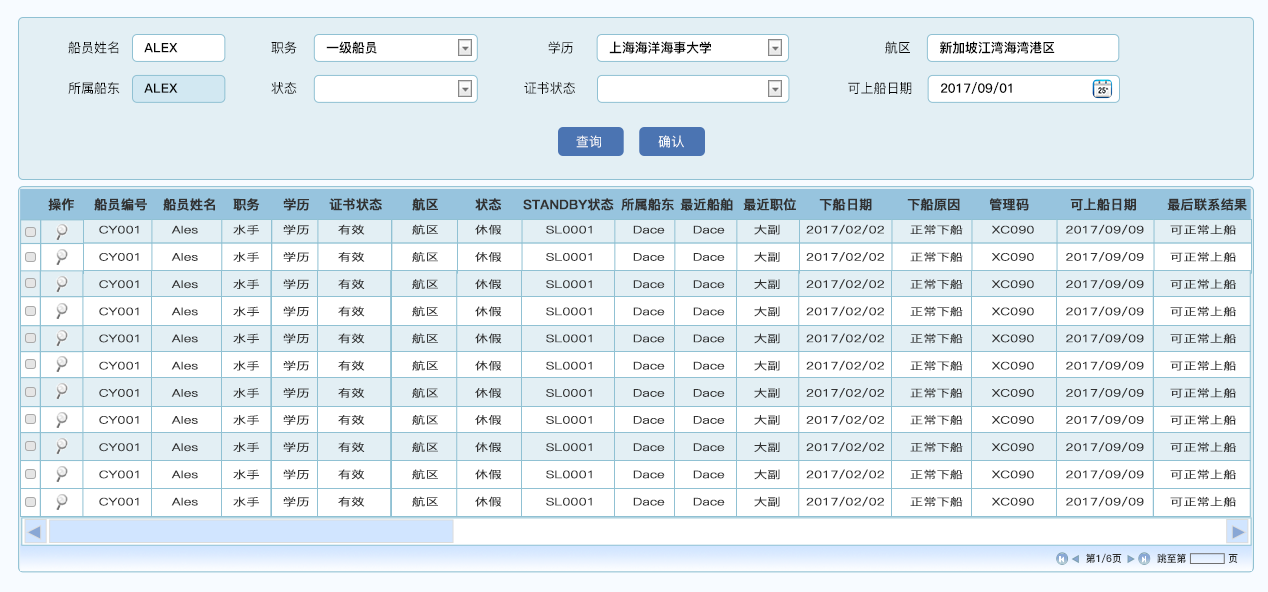
<style>
.page{position:relative;width:1268px;height:592px;background:#e3eff4}
.page>*{position:absolute;margin:0}
.t1{font:13.2px "PingFang-SC-Medium";color:#050505}
.t2{font:13px "PingFang-SC-Heavy";color:#050505}
.t3{font:13.2px "PingFang-SC-Medium";color:#ffffff}
.t4{font:13px "PingFang-SC-Bold";color:#323232;font-weight:bold}
.t5{font:10.4px/13.6px "PingFang-SC-Regular";color:#323232;font-weight:bold;scale:1.26 1}
.t6{font:10px "PingFang-SC-Heavy";color:#2d2e2e}
</style>
<div class="page">
<p class="t1" style="left:68px;top:41px;width:51px;height:13px">船员姓名</p>
<p class="t1" style="left:271px;top:41px;width:26px;height:13px">职务</p>
<p class="t2" style="left:326px;top:41px;width:51px;height:13px">一级船员</p>
<p class="t1" style="left:548px;top:41px;width:25px;height:13px">学历</p>
<p class="t2" style="left:609px;top:41px;width:102px;height:13px">上海海洋海事大学</p>
<p class="t1" style="left:885px;top:41px;width:25px;height:13px">航区</p>
<p class="t2" style="left:940px;top:41px;width:115px;height:13px">新加坡江湾海湾港区</p>
<p class="t2" style="left:144px;top:43px;width:34px;height:10px">ALEX</p>
<p class="t1" style="left:68px;top:81px;width:52px;height:13px">所属船东</p>
<p class="t2" style="left:144px;top:83px;width:34px;height:10px">ALEX</p>
<p class="t1" style="left:271px;top:82px;width:26px;height:12px">状态</p>
<p class="t1" style="left:524px;top:82px;width:51px;height:12px">证书状态</p>
<p class="t1" style="left:848px;top:81px;width:64px;height:13px">可上船日期</p>
<p class="t2" style="left:941px;top:82px;width:71px;height:12px">2017/09/01</p>
<p class="t3" style="left:576px;top:135px;width:25px;height:13px">查询</p>
<p class="t3" style="left:658px;top:135px;width:26px;height:13px">确认</p>
<p class="t4" style="left:48px;top:198px;width:26px;height:13px">操作</p>
<p class="t4" style="left:94px;top:198px;width:53px;height:13px">船员编号</p>
<p class="t4" style="left:163px;top:198px;width:52px;height:13px">船员姓名</p>
<p class="t4" style="left:233px;top:198px;width:27px;height:13px">职务</p>
<p class="t4" style="left:283px;top:198px;width:26px;height:13px">学历</p>
<p class="t4" style="left:329px;top:198px;width:53px;height:13px">证书状态</p>
<p class="t4" style="left:412px;top:198px;width:26px;height:13px">航区</p>
<p class="t4" style="left:475px;top:198px;width:27px;height:13px">状态</p>
<p class="t4" style="left:523px;top:198px;width:91px;height:13px">STANDBY状态</p>
<p class="t4" style="left:621px;top:198px;width:53px;height:13px">所属船东</p>
<p class="t4" style="left:680px;top:198px;width:53px;height:13px">最近船舶</p>
<p class="t4" style="left:743px;top:198px;width:53px;height:13px">最近职位</p>
<p class="t4" style="left:819px;top:198px;width:53px;height:13px">下船日期</p>
<p class="t4" style="left:907px;top:198px;width:53px;height:13px">下船原因</p>
<p class="t4" style="left:989px;top:198px;width:40px;height:13px">管理码</p>
<p class="t4" style="left:1070px;top:198px;width:66px;height:13px">可上船日期</p>
<p class="t4" style="left:1167px;top:198px;width:80px;height:13px">最后联系结果</p>
<p class="t5" style="left:99px;top:225px;width:40px;height:281px">CY001<br><br>CY001<br><br>CY001<br><br>CY001<br><br>CY001<br><br>CY001<br><br>CY001<br><br>CY001<br><br>CY001<br><br>CY001<br><br>CY001</p>
<p class="t5" style="left:171px;top:225px;width:27px;height:281px">Ales<br><br>Ales<br><br>Ales<br><br>Ales<br><br>Ales<br><br>Ales<br><br>Ales<br><br>Ales<br><br>Ales<br><br>Ales<br><br>Ales</p>
<p class="t5" style="left:233px;top:224px;width:26px;height:283px">水手<br><br>水手<br><br>水手<br><br>水手<br><br>水手<br><br>水手<br><br>水手<br><br>水手<br><br>水手<br><br>水手<br><br>水手</p>
<p class="t5" style="left:283px;top:224px;width:26px;height:283px">学历<br><br>学历<br><br>学历<br><br>学历<br><br>学历<br><br>学历<br><br>学历<br><br>学历<br><br>学历<br><br>学历<br><br>学历</p>
<p class="t5" style="left:338px;top:224px;width:27px;height:283px">有效<br><br>有效<br><br>有效<br><br>有效<br><br>有效<br><br>有效<br><br>有效<br><br>有效<br><br>有效<br><br>有效<br><br>有效</p>
<p class="t5" style="left:412px;top:224px;width:26px;height:283px">航区<br><br>航区<br><br>航区<br><br>航区<br><br>航区<br><br>航区<br><br>航区<br><br>航区<br><br>航区<br><br>航区<br><br>航区</p>
<p class="t5" style="left:475px;top:224px;width:27px;height:283px">休假<br><br>休假<br><br>休假<br><br>休假<br><br>休假<br><br>休假<br><br>休假<br><br>休假<br><br>休假<br><br>休假<br><br>休假</p>
<p class="t5" style="left:546px;top:225px;width:46px;height:281px">SL0001<br><br>SL0001<br><br>SL0001<br><br>SL0001<br><br>SL0001<br><br>SL0001<br><br>SL0001<br><br>SL0001<br><br>SL0001<br><br>SL0001<br><br>SL0001</p>
<p class="t5" style="left:633px;top:225px;width:32px;height:281px">Dace<br><br>Dace<br><br>Dace<br><br>Dace<br><br>Dace<br><br>Dace<br><br>Dace<br><br>Dace<br><br>Dace<br><br>Dace<br><br>Dace</p>
<p class="t5" style="left:693px;top:225px;width:32px;height:281px">Dace<br><br>Dace<br><br>Dace<br><br>Dace<br><br>Dace<br><br>Dace<br><br>Dace<br><br>Dace<br><br>Dace<br><br>Dace<br><br>Dace</p>
<p class="t5" style="left:754px;top:224px;width:26px;height:283px">大副<br><br>大副<br><br>大副<br><br>大副<br><br>大副<br><br>大副<br><br>大副<br><br>大副<br><br>大副<br><br>大副<br><br>大副</p>
<p class="t5" style="left:806px;top:224px;width:78px;height:283px">2017/02/02<br><br>2017/02/02<br><br>2017/02/02<br><br>2017/02/02<br><br>2017/02/02<br><br>2017/02/02<br><br>2017/02/02<br><br>2017/02/02<br><br>2017/02/02<br><br>2017/02/02<br><br>2017/02/02</p>
<p class="t5" style="left:910px;top:224px;width:53px;height:283px">正常下船<br><br>正常下船<br><br>正常下船<br><br>正常下船<br><br>正常下船<br><br>正常下船<br><br>正常下船<br><br>正常下船<br><br>正常下船<br><br>正常下船<br><br>正常下船</p>
<p class="t5" style="left:992px;top:225px;width:42px;height:281px">XC090<br><br>XC090<br><br>XC090<br><br>XC090<br><br>XC090<br><br>XC090<br><br>XC090<br><br>XC090<br><br>XC090<br><br>XC090<br><br>XC090</p>
<p class="t5" style="left:1066px;top:224px;width:78px;height:283px">2017/09/09<br><br>2017/09/09<br><br>2017/09/09<br><br>2017/09/09<br><br>2017/09/09<br><br>2017/09/09<br><br>2017/09/09<br><br>2017/09/09<br><br>2017/09/09<br><br>2017/09/09<br><br>2017/09/09</p>
<p class="t5" style="left:1170px;top:224px;width:66px;height:283px">可正常上船<br><br>可正常上船<br><br>可正常上船<br><br>可正常上船<br><br>可正常上船<br><br>可正常上船<br><br>可正常上船<br><br>可正常上船<br><br>可正常上船<br><br>可正常上船<br><br>可正常上船</p>
<p class="t6" style="left:1086px;top:553px;width:36px;height:10px">第1/6页</p>
<p class="t6" style="left:1157px;top:553px;width:81px;height:10px">跳至第             页</p>
</div>
